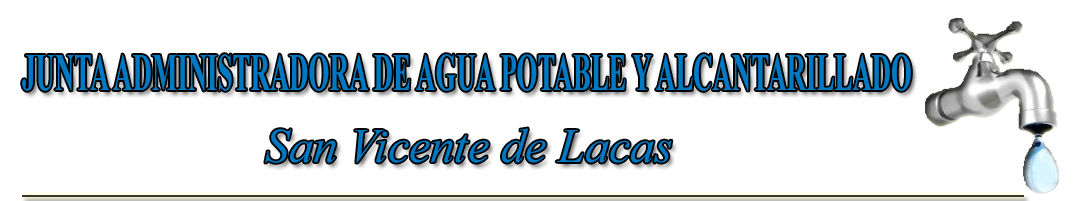
<style>
.page{position:relative;width:1082px;height:201px;background:#ffffff}
.page>*{position:absolute;margin:0}
.t1{font:52.7px "TimesNewRomanPS-BoldMT";color:#0078c2;scale:0.51 1}
.t2{font:48px "TimesNewRomanPS-ItalicMT";color:#0078c2}
</style>
<div class="page">
<p class="t1" style="left:22px;top:54px;width:889px;height:37px">JUNTA ADMINISTRADORA DE AGUA POTABLE Y ALCANTARILLADO</p>
<p class="t2" style="left:265px;top:128px;width:407px;height:35px">San Vicente de Lacas</p>
</div>
